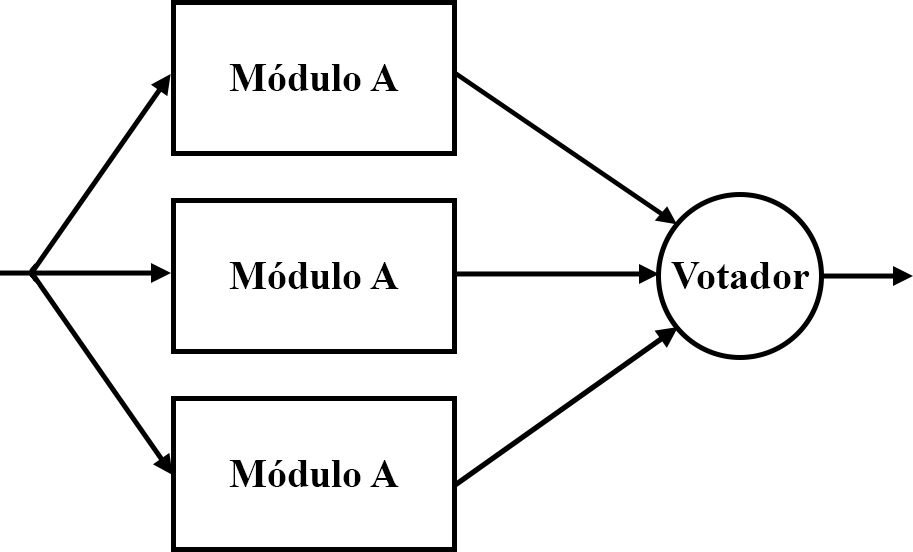
<style>
.page{position:relative;width:913px;height:552px;background:#ffffff}
.page>*{position:absolute;margin:0}
.t1{font:40px "TimesNewRomanPS-BoldMT";color:#000000}
</style>
<div class="page">
<p class="t1" style="left:229px;top:64px;width:170px;height:27px">Módulo A</p>
<p class="t1" style="left:229px;top:262px;width:170px;height:27px">Módulo A</p>
<p class="t1" style="left:671px;top:262px;width:139px;height:27px">Votador</p>
<p class="t1" style="left:229px;top:460px;width:170px;height:27px">Módulo A</p>
</div>
